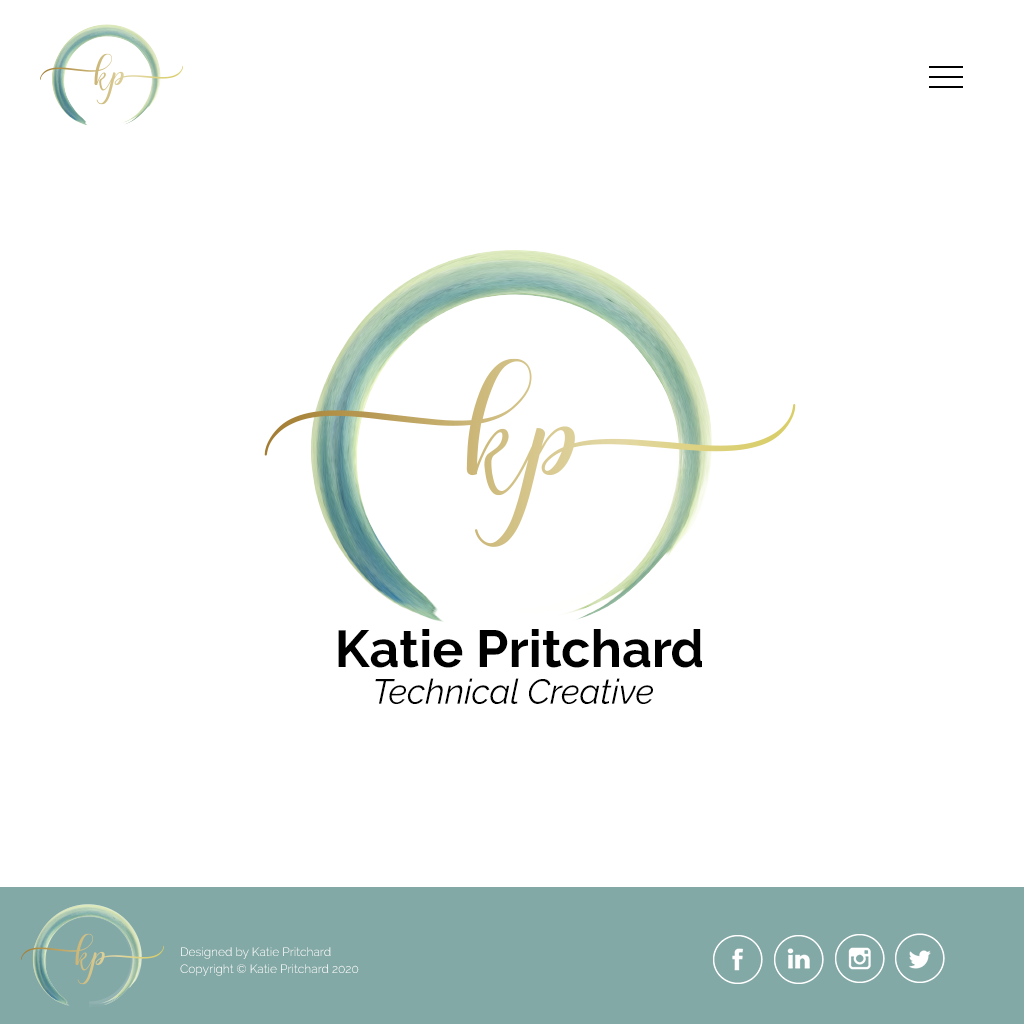
<style>
.page{position:relative;width:1024px;height:1024px;background:#ffffff}
.page>*{position:absolute;margin:0}
.t1{font:52px "Raleway-Bold";color:#000000}
.t2{font:34.7px "Raleway-Italic";color:#000000}
.t3{font:12px "Raleway-Light";color:#ffffff}
</style>
<div class="page">
<p class="t1" style="left:338px;top:629px;width:364px;height:39px">Katie Pritchard</p>
<p class="t2" style="left:375px;top:678px;width:278px;height:26px">Technical Creative</p>
<p class="t3" style="left:181px;top:947px;width:150px;height:12px">Designed by Katie Pritchard</p>
<p class="t3" style="left:180px;top:964px;width:179px;height:12px">Copyright © Katie Pritchard 2020</p>
</div>
